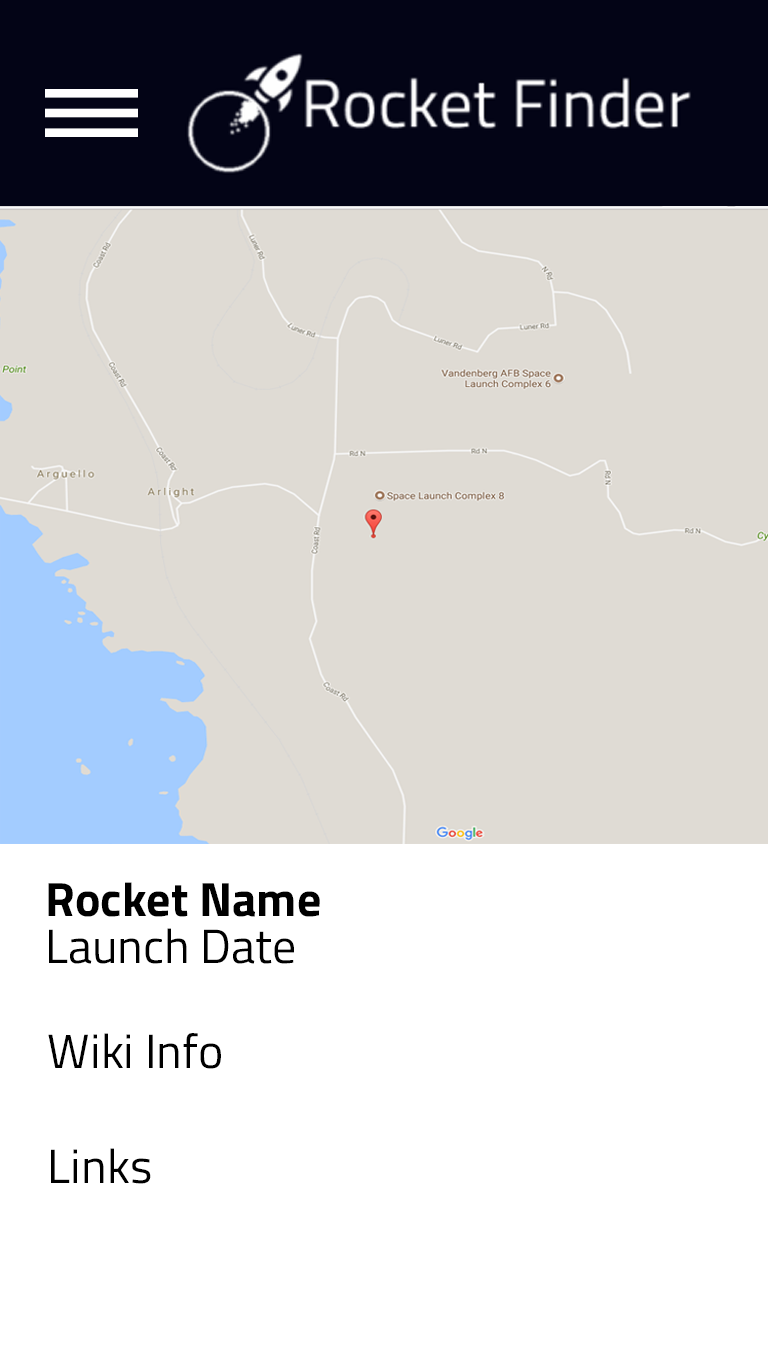
<style>
.page{position:relative;width:768px;height:1366px;background:#dfdbd4}
.page>*{position:absolute;margin:0}
.t1{font:48px "TitilliumWeb-Bold";color:#000000}
.t2{font:48px "TitilliumWeb-Regular";color:#000000}
</style>
<div class="page">
<p class="t1" style="left:48px;top:882px;width:272px;height:35px">Rocket Name</p>
<p class="t2" style="left:49px;top:928px;width:245px;height:36px">Launch Date</p>
<p class="t2" style="left:48px;top:1033px;width:173px;height:151px">Wiki Info <br><br>Links</p>
</div>
